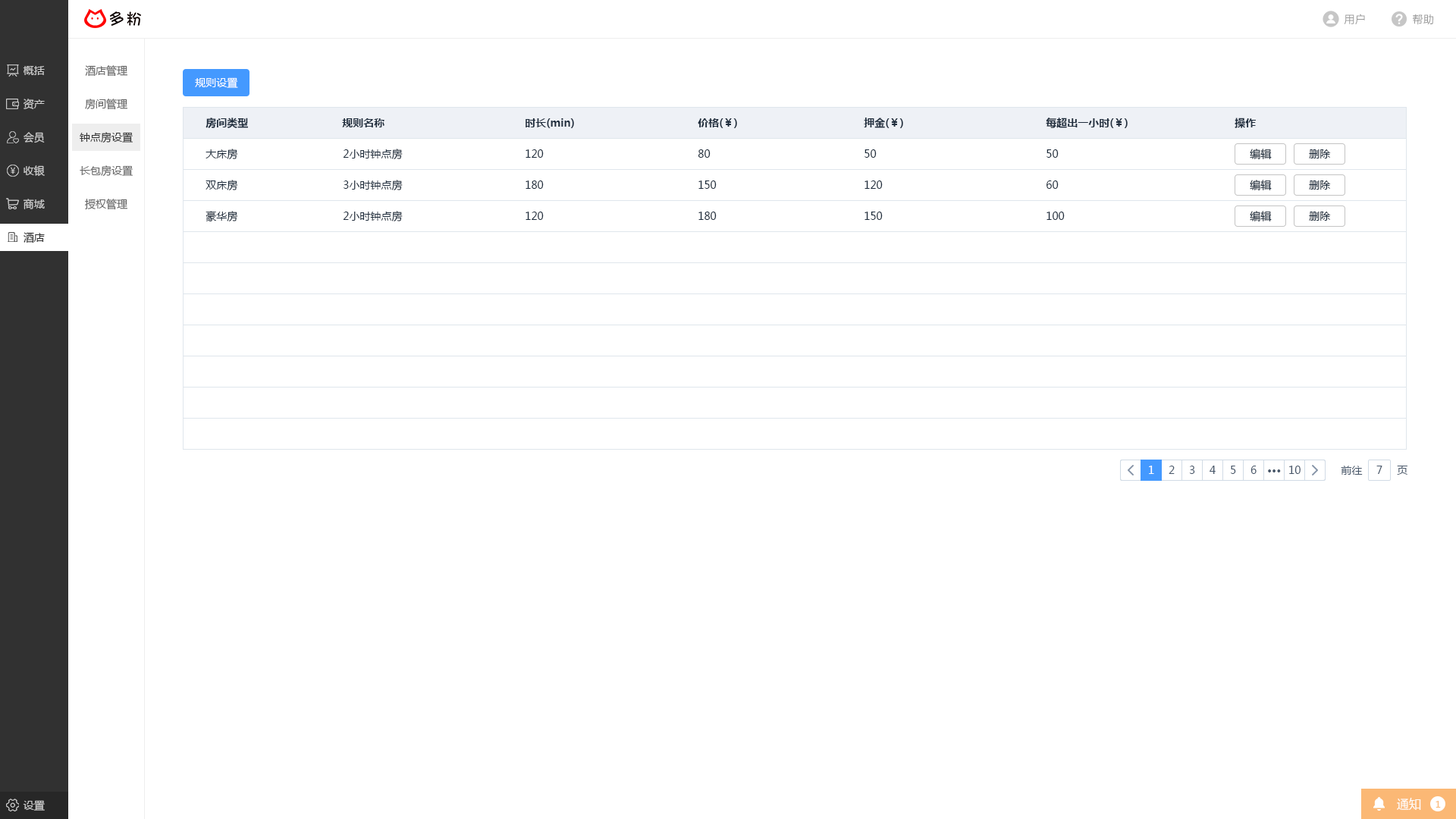
<style>
.page{position:relative;width:1456px;height:819px;background:#ffffff}
.page>*{position:absolute;margin:0}
.t1{font:10.6px "MicrosoftYaHei";letter-spacing:0.025em;color:#999999}
.t2{font:10.6px "MicrosoftYaHei";color:#cccccc}
.t3{font:10.6px "MicrosoftYaHei";color:#666666}
.t4{font:10.6px "MicrosoftYaHei";color:#ffffff}
.t5{font:10.6px "MicrosoftYaHei-Bold";color:#1f2d3d}
.t6{font:10.6px "MicrosoftYaHei";color:#333333}
.t7{font:10.6px "MicrosoftYaHei";color:#1f2d3d}
.t8{font:10.6px "MicrosoftYaHei";color:#313131}
.t9{font:10.6px "MicrosoftYaHei";color:#48576a}
.t10{font:10.6px "MicrosoftYaHei-Bold";color:#48576a}
.t11{font:12.1px "MicrosoftYaHei";color:#ffffff}
.t12{font:9.1px "MicrosoftYaHei";color:#fbb875}
</style>
<div class="page">
<p class="t1" style="left:1344px;top:14px;width:21px;height:11px">用户</p>
<p class="t1" style="left:1413px;top:14px;width:20px;height:11px">帮助</p>
<p class="t2" style="left:23px;top:66px;width:22px;height:9px">概括</p>
<p class="t3" style="left:85px;top:65px;width:42px;height:12px">酒店管理</p>
<p class="t4" style="left:195px;top:77px;width:43px;height:11px">规则设置</p>
<p class="t2" style="left:24px;top:99px;width:21px;height:10px">资产</p>
<p class="t3" style="left:85px;top:99px;width:42px;height:11px">房间管理</p>
<p class="t5" style="left:206px;top:118px;width:42px;height:10px">房间类型</p>
<p class="t5" style="left:342px;top:118px;width:42px;height:9px">规则名称</p>
<p class="t5" style="left:526px;top:118px;width:48px;height:10px">时长(min)</p>
<p class="t5" style="left:698px;top:118px;width:39px;height:10px">价格(￥)</p>
<p class="t5" style="left:864px;top:118px;width:39px;height:10px">押金(￥)</p>
<p class="t5" style="left:1046px;top:118px;width:82px;height:10px">每超出一小时(￥)</p>
<p class="t5" style="left:1235px;top:118px;width:21px;height:10px">操作</p>
<p class="t2" style="left:24px;top:132px;width:21px;height:11px">会员</p>
<p class="t6" style="left:80px;top:132px;width:53px;height:11px">钟点房设置</p>
<p class="t7" style="left:206px;top:149px;width:32px;height:11px">大床房</p>
<p class="t7" style="left:343px;top:149px;width:60px;height:10px">2小时钟点房</p>
<p class="t7" style="left:526px;top:149px;width:18px;height:9px">120</p>
<p class="t7" style="left:698px;top:149px;width:13px;height:9px">80</p>
<p class="t7" style="left:864px;top:149px;width:13px;height:9px">50</p>
<p class="t7" style="left:1046px;top:149px;width:13px;height:9px">50</p>
<p class="t7" style="left:1250px;top:149px;width:22px;height:10px">编辑</p>
<p class="t7" style="left:1309px;top:149px;width:22px;height:9px">删除</p>
<p class="t2" style="left:24px;top:165px;width:21px;height:11px">收银</p>
<p class="t3" style="left:80px;top:165px;width:53px;height:12px">长包房设置</p>
<p class="t7" style="left:206px;top:180px;width:32px;height:11px">双床房</p>
<p class="t7" style="left:344px;top:180px;width:59px;height:10px">3小时钟点房</p>
<p class="t7" style="left:526px;top:180px;width:18px;height:9px">180</p>
<p class="t7" style="left:698px;top:180px;width:19px;height:9px">150</p>
<p class="t7" style="left:864px;top:180px;width:19px;height:9px">120</p>
<p class="t7" style="left:1046px;top:180px;width:13px;height:9px">60</p>
<p class="t7" style="left:1250px;top:180px;width:22px;height:10px">编辑</p>
<p class="t7" style="left:1309px;top:180px;width:22px;height:10px">删除</p>
<p class="t2" style="left:23px;top:199px;width:22px;height:10px">商城</p>
<p class="t3" style="left:85px;top:199px;width:42px;height:11px">授权管理</p>
<p class="t7" style="left:206px;top:211px;width:32px;height:11px">豪华房</p>
<p class="t7" style="left:343px;top:211px;width:60px;height:10px">2小时钟点房</p>
<p class="t7" style="left:526px;top:212px;width:18px;height:8px">120</p>
<p class="t7" style="left:698px;top:212px;width:19px;height:8px">180</p>
<p class="t7" style="left:864px;top:212px;width:19px;height:8px">150</p>
<p class="t7" style="left:1046px;top:212px;width:19px;height:8px">100</p>
<p class="t7" style="left:1250px;top:211px;width:22px;height:10px">编辑</p>
<p class="t7" style="left:1309px;top:212px;width:22px;height:9px">删除</p>
<p class="t8" style="left:24px;top:232px;width:21px;height:11px">酒店</p>
<p class="t4" style="left:1149px;top:466px;width:5px;height:8px">1</p>
<p class="t9" style="left:1169px;top:466px;width:6px;height:8px">2</p>
<p class="t9" style="left:1189px;top:466px;width:6px;height:8px">3</p>
<p class="t9" style="left:1210px;top:466px;width:6px;height:8px">4</p>
<p class="t9" style="left:1231px;top:466px;width:5px;height:8px">5</p>
<p class="t9" style="left:1250px;top:466px;width:7px;height:8px">6</p>
<p class="t10" style="left:1268px;top:469px;width:13px;height:3px">···</p>
<p class="t9" style="left:1289px;top:466px;width:12px;height:8px">10</p>
<p class="t9" style="left:1341px;top:466px;width:22px;height:9px">前往</p>
<p class="t9" style="left:1376px;top:466px;width:6px;height:8px">7</p>
<p class="t9" style="left:1397px;top:466px;width:10px;height:9px">页</p>
<p class="t11" style="left:1397px;top:798px;width:24px;height:12px">通知</p>
<p class="t2" style="left:23px;top:800px;width:22px;height:11px">设置</p>
<p class="t12" style="left:1436px;top:801px;width:5px;height:7px">1</p>
</div>
